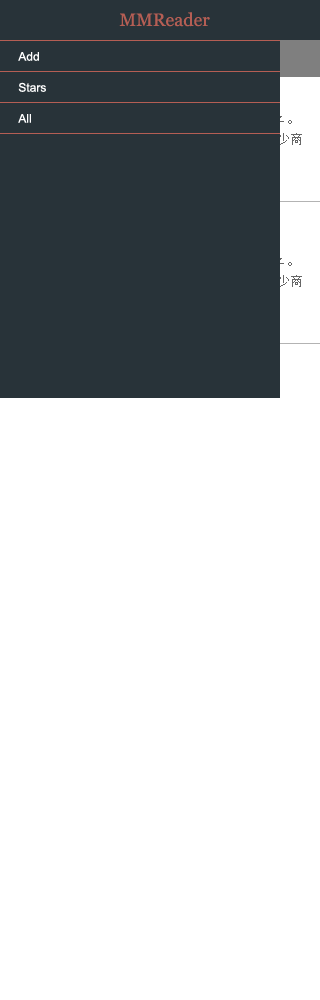
<style>
.page{position:relative;width:320px;height:1000px;background:#ffffff}
.page>*{position:absolute;margin:0}
.t1{font:18px "Georgia";color:#b55e54}
.t2{font:12px "ArialMT";color:#ffffff}
</style>
<div class="page">
<p class="t1" style="left:119px;top:12px;width:91px;height:15px">MMReader</p>
<p class="t2" style="left:18px;top:52px;width:21px;height:9px">Add</p>
<p class="t2" style="left:18px;top:82px;width:28px;height:10px">Stars</p>
<p class="t2" style="left:18px;top:114px;width:13px;height:9px">All</p>
</div>
